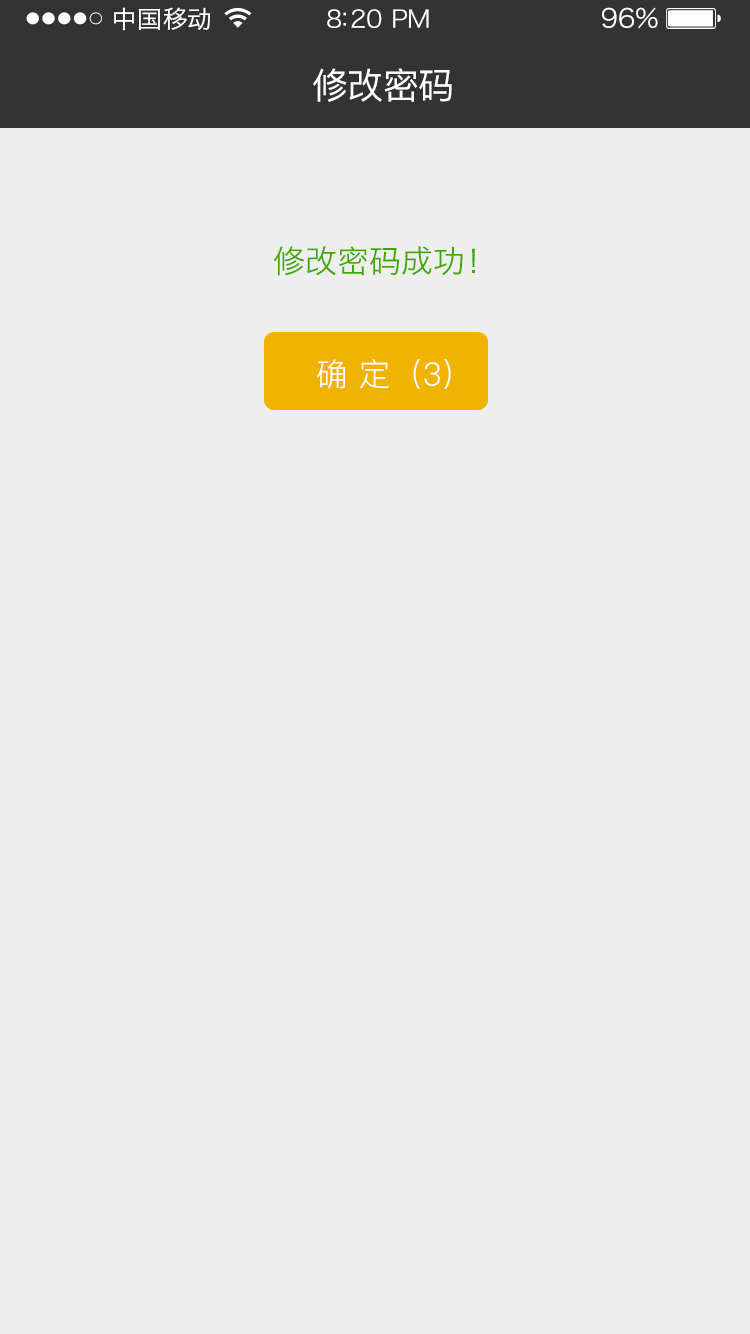
<style>
.page{position:relative;width:750px;height:1334px;background:#eeeeee}
.page>*{position:absolute;margin:0}
.t1{font:24px "HiraginoSansGB-W3";letter-spacing:0.02em;color:#ffffff;scale:1.03 1}
.t2{font:24px "HiraginoSansGB-W3";letter-spacing:-0.02em;color:#ffffff;scale:1.03 1}
.t3{font:26.2px "HiraginoSansGB-W3";letter-spacing:-0.02em;color:#ffffff;scale:1.03 1}
.t4{font:36px "PingFang-SC-Medium";letter-spacing:-0.02em;color:#ffffff}
.t5{font:32px "HiraginoSansGB-W3";color:#40a900}
.t6{font:32px "PingFang-SC-Regular";color:#ffffff}
</style>
<div class="page">
<p class="t1" style="left:114px;top:7px;width:97px;height:24px">中国移动</p>
<p class="t2" style="left:327px;top:9px;width:102px;height:19px">8:20 PM</p>
<p class="t3" style="left:602px;top:7px;width:56px;height:22px">96%</p>
<p class="t4" style="left:313px;top:68px;width:139px;height:34px">修改密码</p>
<p class="t5" style="left:273px;top:246px;width:202px;height:30px">修改密码成功！</p>
<p class="t6" style="left:317px;top:359px;width:134px;height:30px">确 定（3）</p>
</div>
